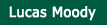
<style>
.page{position:relative;width:107px;height:25px;background:#005941}
.page>*{position:absolute;margin:0}
.t1{font:14px "Tahoma";letter-spacing:0.02em;color:#ffffff;font-weight:bold}
</style>
<div class="page">
<p class="t1" style="left:9px;top:6px;width:87px;height:15px">Lucas Moody</p>
</div>
